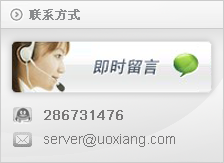
<style>
.page{position:relative;width:224px;height:163px}
.page>*{position:absolute;margin:0}
.t1{font:12px "SimSun";color:#8a8b8d;font-weight:bold}
.t2{font:14px "ArialMT";color:#797878;font-weight:bold}
.t3{font:14px "ArialMT";color:#797878}
</style>
<div class="page">
<p class="t1" style="left:29px;top:9px;width:51px;height:11px">联系方式</p>
<p class="t2" style="left:44px;top:110px;width:79px;height:10px">286731476</p>
<p class="t3" style="left:44px;top:134px;width:131px;height:13px">server@uoxiang.com</p>
</div>
